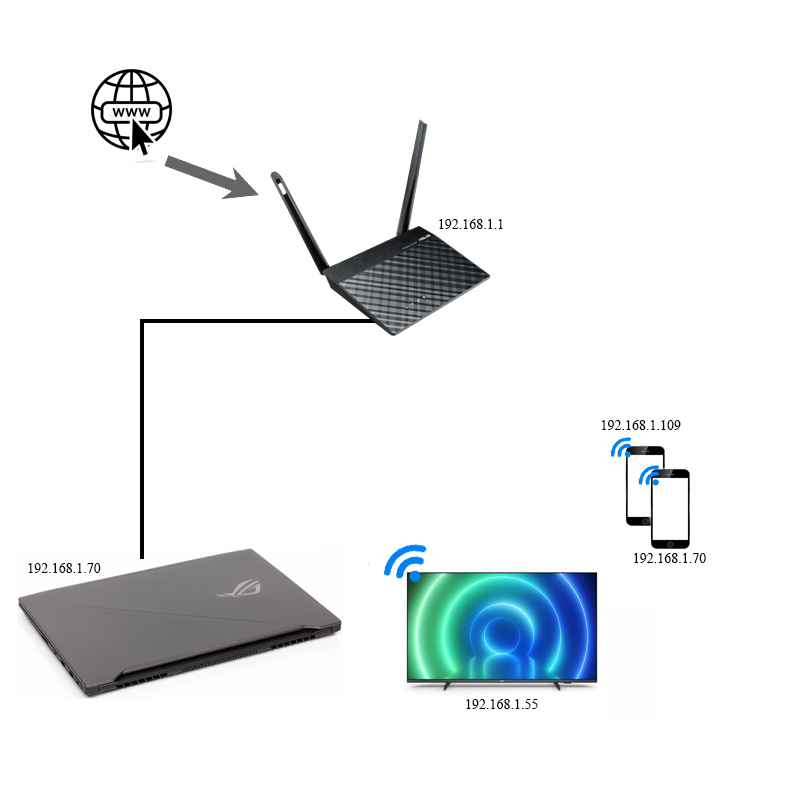
<style>
.page{position:relative;width:800px;height:800px;background:#fffffe}
.page>*{position:absolute;margin:0}
.t1{font:14px "TimesNewRomanPSMT";color:#000000}
</style>
<div class="page">
<p class="t1" style="left:439px;top:219px;width:64px;height:10px">192.168.1.1</p>
<p class="t1" style="left:602px;top:420px;width:79px;height:10px">192.168.1.109</p>
<p class="t1" style="left:634px;top:553px;width:72px;height:10px">192.168.1.70</p>
<p class="t1" style="left:28px;top:563px;width:73px;height:10px">192.168.1.70</p>
<p class="t1" style="left:466px;top:699px;width:72px;height:10px">192.168.1.55</p>
</div>
